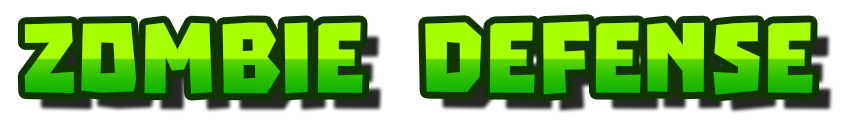
<style>
.page{position:relative;width:842px;height:126px;background:#ffffff}
.page>*{position:absolute;margin:0}
.t1{font:112.5px "Millennia1"}
</style>
<div class="page">
<p class="t1" style="left:24px;top:21px;width:789px;height:74px">Zombie defense</p>
</div>
